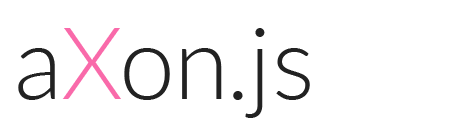
<style>
.page{position:relative;width:450px;height:128px;background:#ffffff}
.page>*{position:absolute;margin:0}
.t1{font:100px "Lato-Light";color:#222222}
.t2{font:100px "Lato-Light";color:#f96aaa}
</style>
<div class="page">
<p class="t1" style="left:18px;top:28px;width:292px;height:90px">a<span class="t2">X</span>on.js</p>
</div>
